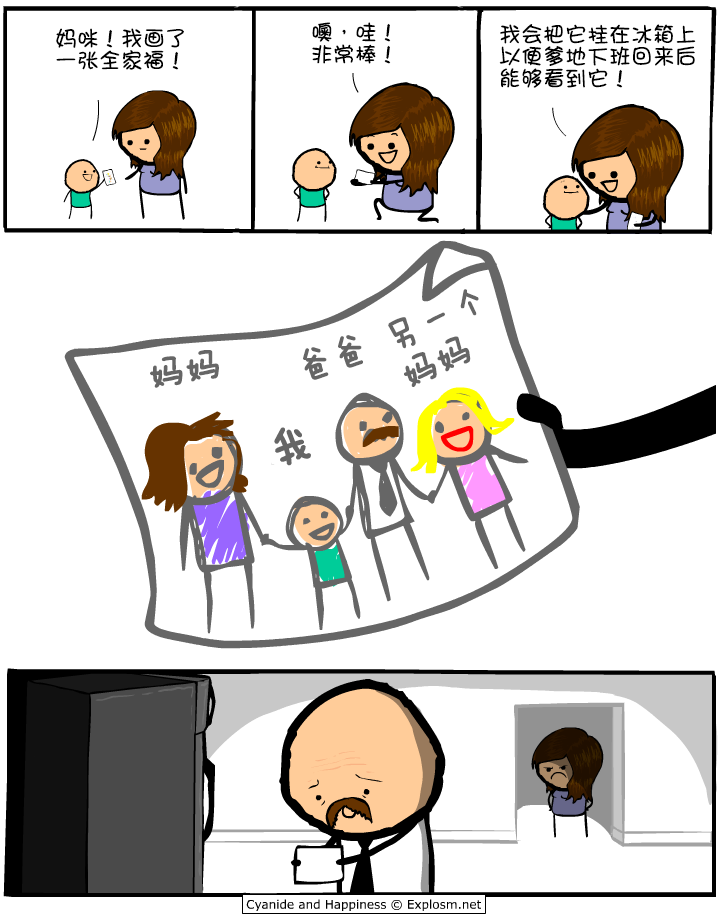
<style>
.page{position:relative;width:720px;height:920px;background:#ffffff}
.page>*{position:absolute;margin:0}
.t1{font:22px/22px "DFGirl";color:#000000}
.t2{font:36px/39px "FZMWJW--GB1-0";color:#666666;font-weight:bold}
.t3{font:36px "FZMWJW--GB1-0";color:#666666;font-weight:bold}
.t4{font:48px "FZMWJW--GB1-0";color:#666666;font-weight:bold}
</style>
<div class="page">
<p class="t1" style="left:56px;top:28px;width:128px;height:42px">妈咪！我画了<br>一张全家福！</p>
<p class="t1" style="left:312px;top:22px;width:79px;height:42px">噢，哇！<br>非常棒！</p>
<p class="t1" style="left:499px;top:24px;width:197px;height:64px">我会把它挂在冰箱上<br>以便爹地下班回来后<br>能够看到它！</p>
<p class="t2" style="left:388px;top:289px;width:91px;height:98px;rotate:-25deg">另一个<br>妈妈</p>
<p class="t3" style="left:303px;top:335px;width:60px;height:45px;rotate:-19deg">爸爸</p>
<p class="t3" style="left:150px;top:350px;width:69px;height:38px;rotate:-10deg">妈妈</p>
<p class="t4" style="left:274px;top:427px;width:37px;height:39px;rotate:-18deg">我</p>
</div>
